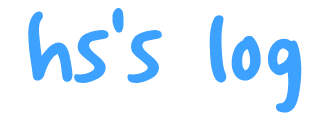
<style>
.page{position:relative;width:330px;height:120px;background:#ffffff}
.page>*{position:absolute;margin:0}
.t1{font:148px "godoMaum";letter-spacing:-0.015em;color:#3da1ff}
</style>
<div class="page">
<p class="t1" style="left:28px;top:8px;width:274px;height:105px">hs’s log</p>
</div>
